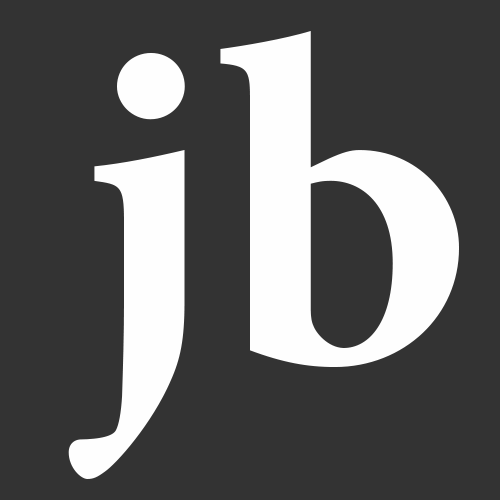
<style>
.page{position:relative;width:500px;height:500px;background:#333333}
.page>*{position:absolute;margin:0}
.t1{font:658.3px "AdobeArabic-Bold";color:#fefefe}
</style>
<div class="page">
<p class="t1" style="left:68px;top:31px;width:391px;height:448px">jb</p>
</div>
